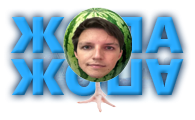
<style>
.page{position:relative;width:195px;height:120px;background:#ffffff}
.page>*{position:absolute;margin:0}
.t1{font:52px "SegoeUIBlack"}
</style>
<div class="page">
<p class="t1" style="left:11px;top:16px;width:173px;height:38px">ЖОПА</p>
<p class="t1" style="left:11px;top:58px;width:173px;height:38px">ЖОПА</p>
</div>
